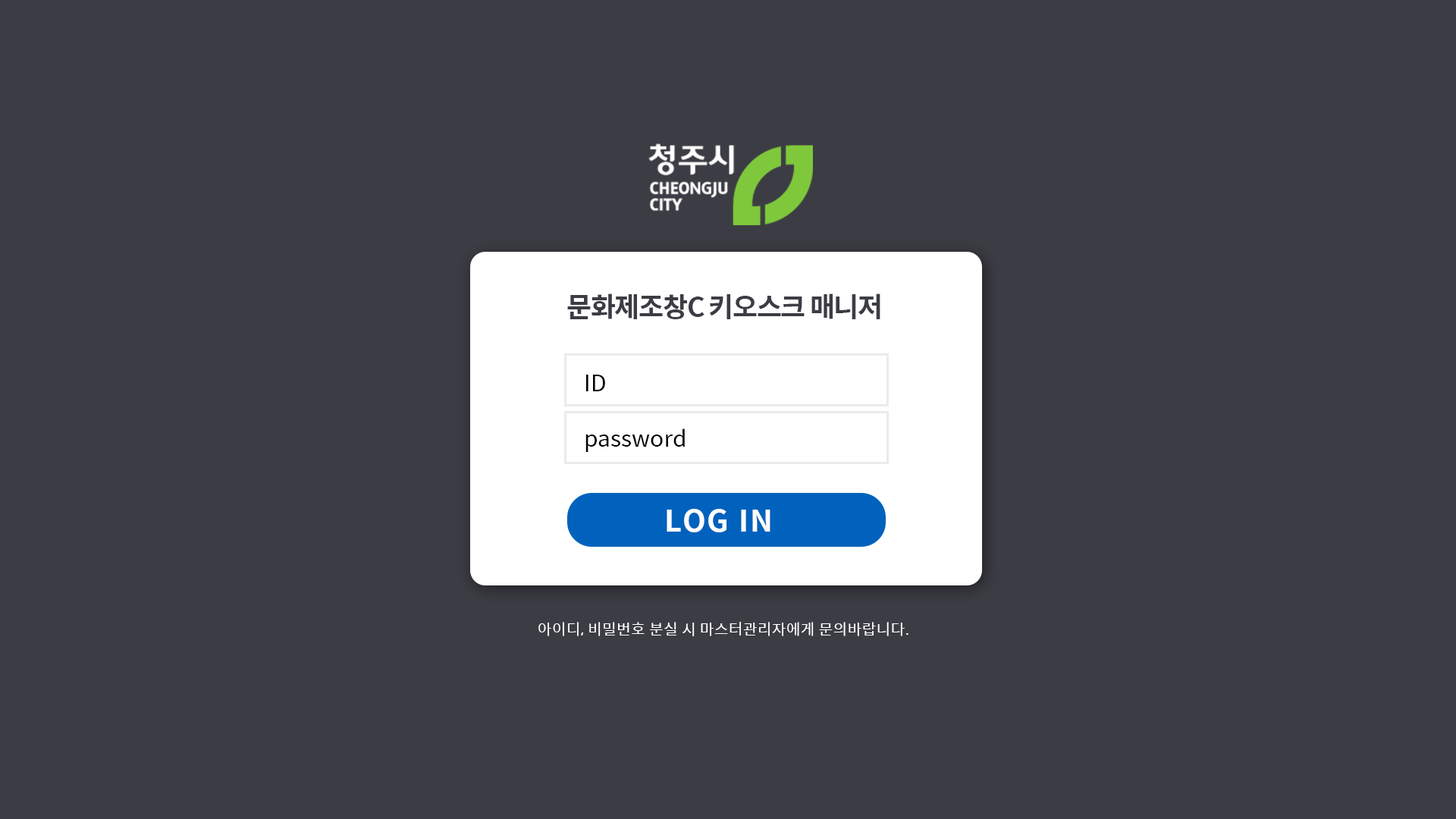
<style>
.page{position:relative;width:1456px;height:819px;background:#3c3d44}
.page>*{position:absolute;margin:0}
.t1{font:27.6px "SpoqaHanSans-Bold";letter-spacing:-0.05em;color:#3c3d44}
.t2{font:22.7px "SpoqaHanSans-Regular";color:#000000}
.t3{font:30.3px "SpoqaHanSans-Bold";letter-spacing:0.05em;color:#ffffff}
.t4{font:15.2px "SpoqaHanSans-Regular";letter-spacing:0.025em;color:#ffffff}
</style>
<div class="page">
<p class="t1" style="left:567px;top:293px;width:313px;height:26px">문화제조창C 키오스크 매니저</p>
<p class="t2" style="left:586px;top:375px;width:19px;height:16px">ID</p>
<p class="t2" style="left:585px;top:428px;width:100px;height:24px">password</p>
<p class="t3" style="left:667px;top:509px;width:103px;height:23px">LOG IN</p>
<p class="t4" style="left:538px;top:622px;width:370px;height:14px">아이디, 비밀번호 분실 시 마스터관리자에게 문의바랍니다.</p>
</div>
